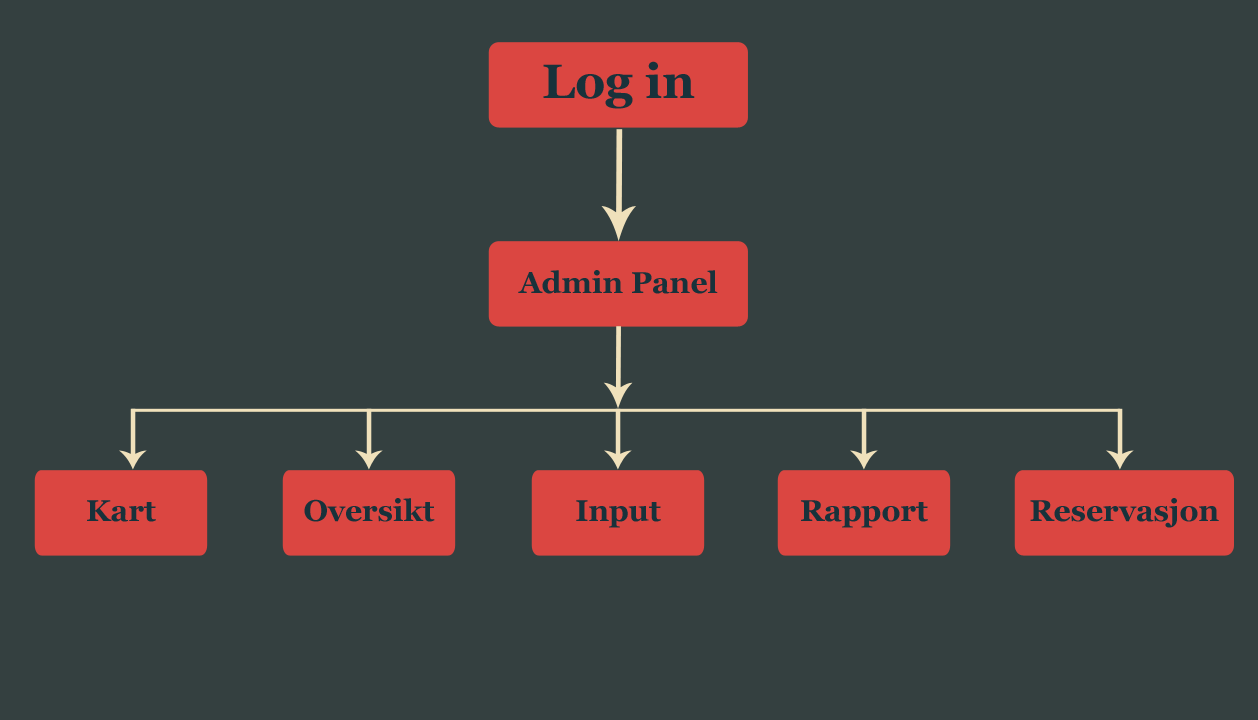
<style>
.page{position:relative;width:1258px;height:720px;background:#344040}
.page>*{position:absolute;margin:0}
.t1{font:48px "Georgia-Bold";color:#18323b}
.t2{font:30px "Georgia-Bold";color:#18323b}
</style>
<div class="page">
<p class="t1" style="left:543px;top:61px;width:152px;height:48px">Log in</p>
<p class="t2" style="left:518px;top:270px;width:200px;height:24px">Admin Panel</p>
<p class="t2" style="left:87px;top:500px;width:69px;height:22px">Kart</p>
<p class="t2" style="left:304px;top:498px;width:131px;height:24px">Oversikt</p>
<p class="t2" style="left:576px;top:500px;width:85px;height:28px">Input</p>
<p class="t2" style="left:801px;top:500px;width:127px;height:28px">Rapport</p>
<p class="t2" style="left:1030px;top:498px;width:189px;height:30px">Reservasjon</p>
</div>
